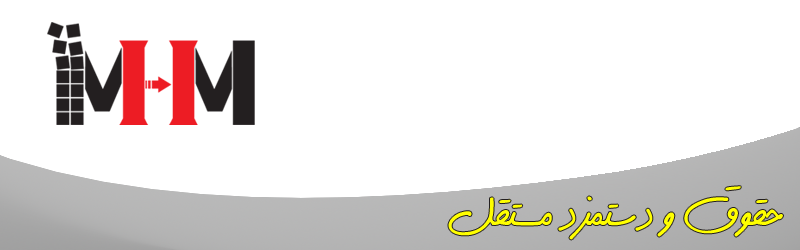
<style>
.page{position:relative;width:800px;height:250px;background:#ffffff}
.page>*{position:absolute;margin:0}
.t1{font:43.9px "DastNevis";color:#ffff00}
</style>
<div class="page">
<p class="t1" style="left:448px;top:186px;width:335px;height:54px">حقوق و دستمزد مستقل</p>
</div>
